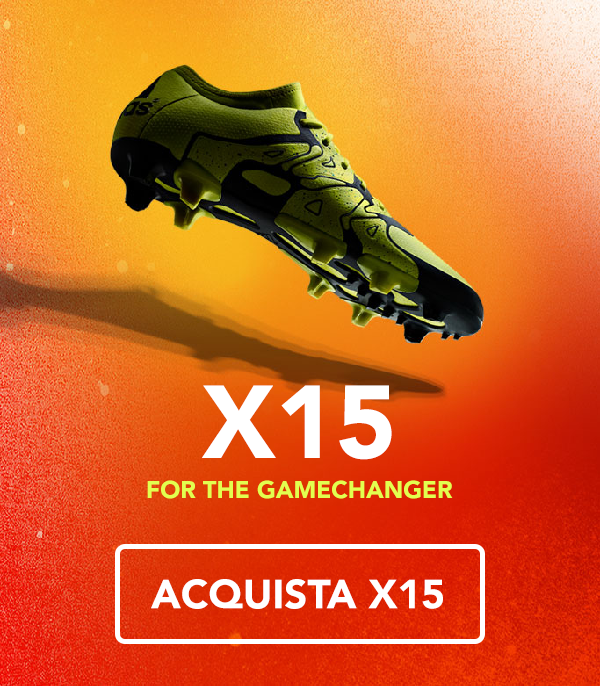
<style>
.page{position:relative;width:600px;height:686px}
.page>*{position:absolute;margin:0}
.t1{font:24px/40px "Avenir-Black";color:#e2fe4f;text-transform:uppercase}
.t2{font:102px/40px "Avenir-Black";color:#ffffff;text-transform:uppercase}
.t3{font:40.2px "Avenir-Black";color:#ffffff;text-transform:uppercase}
</style>
<div class="page">
<p class="t1" style="left:147px;top:385px;width:306px;height:114px;text-align:center"><span class="t2">X15<br></span>FOR THE GAMECHANGER</p>
<p class="t3" style="left:151px;top:579px;width:292px;height:30px">ACQUISTA X15</p>
</div>
